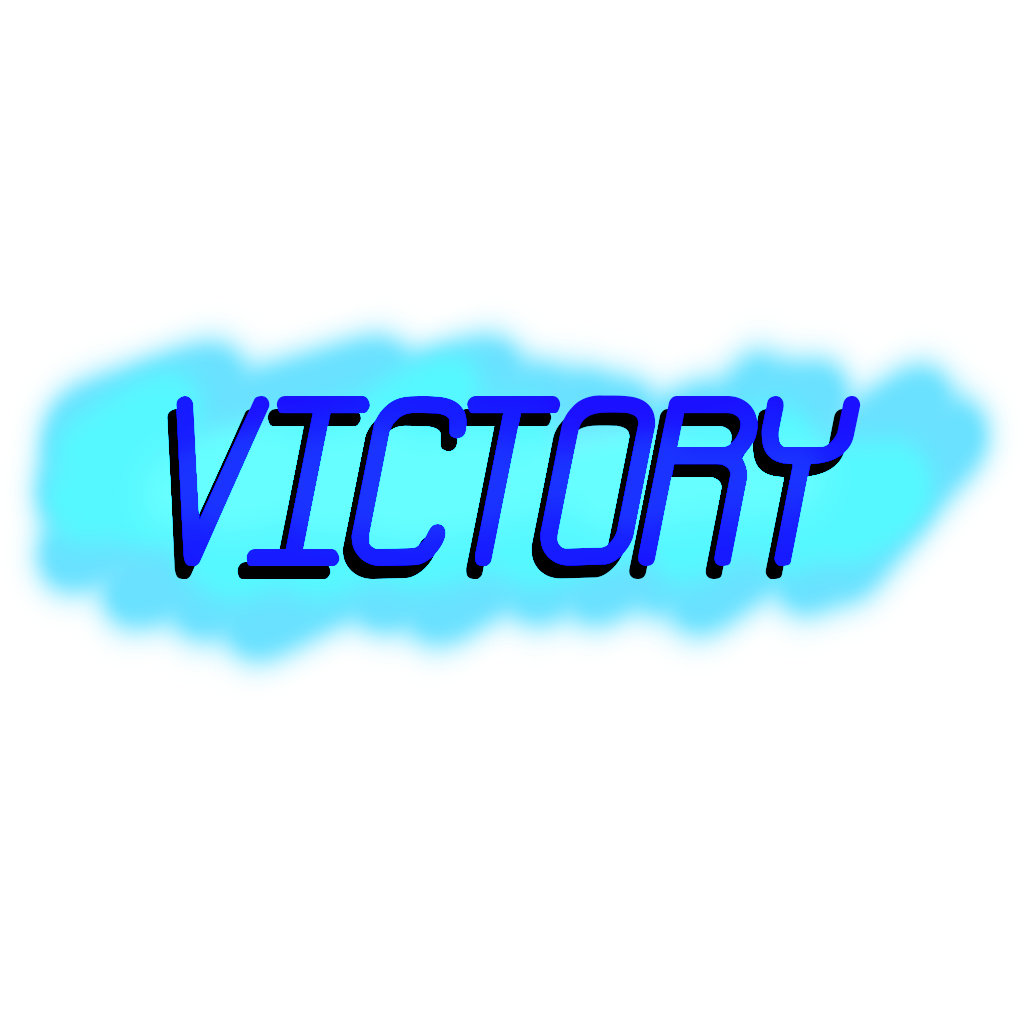
<style>
.page{position:relative;width:1024px;height:1024px;background:#ffffff}
.page>*{position:absolute;margin:0}
.t1{font:244.9px "NeuralBRK";color:#1b10ff}
.t2{font:244.9px "NeuralBRK"}
</style>
<div class="page">
<p class="t1" style="left:176px;top:395px;width:685px;height:171px">VICTORY</p>
<p class="t2" style="left:167px;top:408px;width:685px;height:171px">VICTORY</p>
</div>
